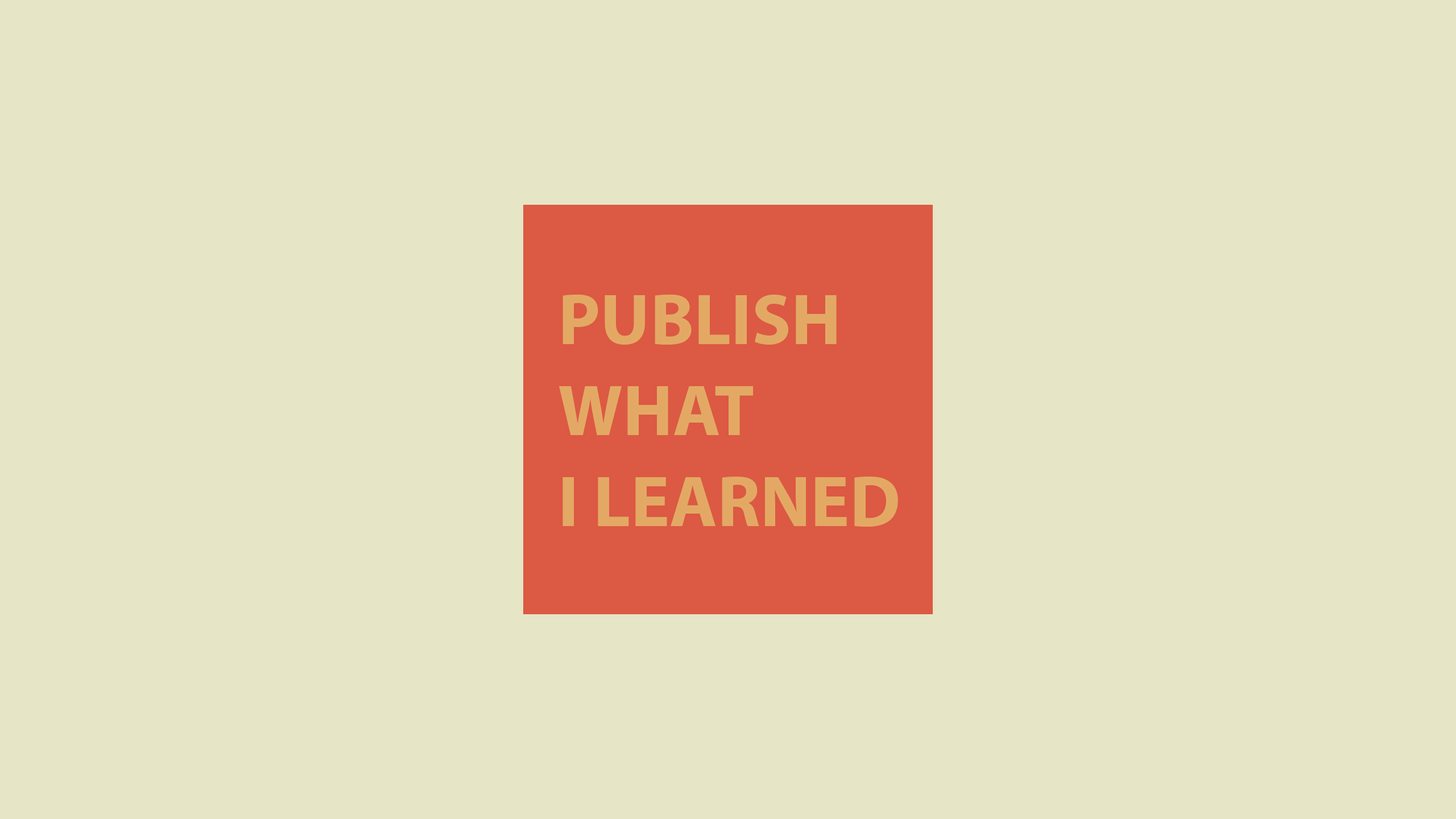
<style>
.page{position:relative;width:1456px;height:819px;background:#e6e5c6}
.page>*{position:absolute;margin:0}
.t1{font:72.8px/91px "MyriadPro-Bold";color:#e3a964;text-transform:uppercase}
</style>
<div class="page">
<p class="t1" style="left:559px;top:294px;width:339px;height:233px">Publish<br>What<br>I Learned</p>
</div>
